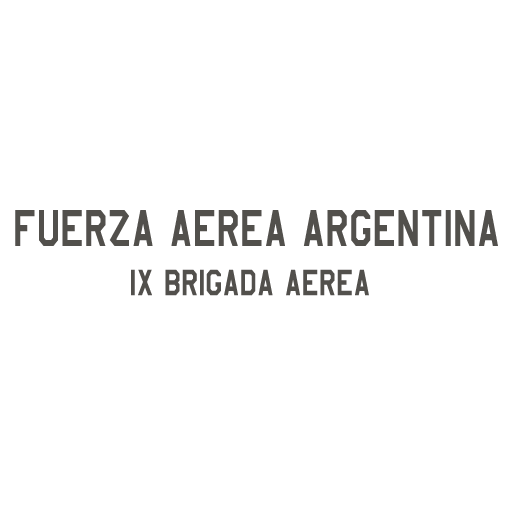
<style>
.page{position:relative;width:512px;height:512px;background:#ffffff}
.page>*{position:absolute;margin:0}
.t1{font:60px "AmarilloUSAF";color:#52504c;scale:0.79 1}
.t2{font:42px "AmarilloUSAF";color:#52504c;scale:0.82 1}
.t3{font:60px "AmarilloUSAF";color:#52504c;scale:0.82 1}
</style>
<div class="page">
<p class="t1" style="left:15px;top:210px;width:483px;height:36px">FUERZA AEREA ARGENTINA</p>
<p class="t2" style="left:131px;top:269px;width:238px;height:27px"><span class="t3">  </span>IX BRIGADA AEREA</p>
</div>
